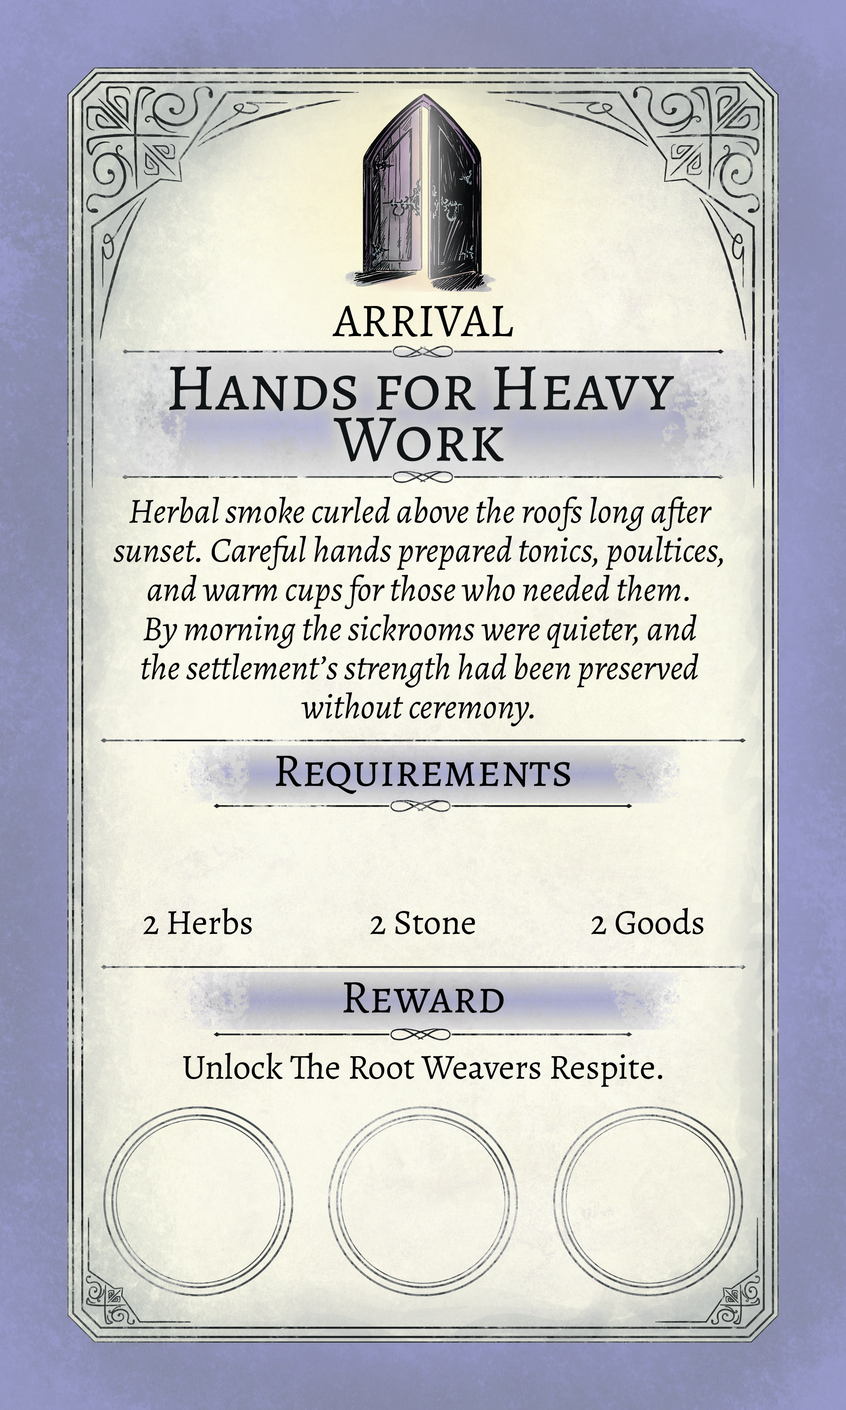
<style>
.page{position:relative;width:846px;height:1410px}
.page>*{position:absolute;margin:0}
.t1{font:47px "Alegreya-Regular";color:#000000;text-transform:uppercase}
.t2{font:66.6px "Alegreya-Regular";color:#000000;font-variant:small-caps}
.t3{font:35.2px/39.2px "Alegreya-Italic";color:#000000}
.t4{font:47px "Alegreya-Regular";color:#000000;font-variant:small-caps}
.t5{font:35.2px "Alegreya-Regular";color:#000000}
</style>
<div class="page">
<p class="t1" style="left:332px;top:305px;width:181px;height:32px">Arrival</p>
<p class="t2" style="left:169px;top:366px;width:505px;height:96px">Hands for Heavy Work</p>
<p class="t3" style="left:113px;top:496px;width:610px;height:230px;text-align:center">Herbal smoke curled above the roofs long after sunset. Careful hands prepared tonics, poultices, and warm cups for those who needed them.<br>By morning the sickrooms were quieter, and<br>the settlement’s strength had been preserved without ceremony.</p>
<p class="t4" style="left:275px;top:756px;width:295px;height:38px">Requirements</p>
<p class="t5" style="left:143px;top:907px;width:109px;height:27px">2 Herbs</p>
<p class="t5" style="left:370px;top:911px;width:105px;height:23px">2 Stone</p>
<p class="t5" style="left:591px;top:907px;width:112px;height:27px">2 Goods</p>
<p class="t4" style="left:343px;top:982px;width:161px;height:31px">Reward</p>
<p class="t5" style="left:183px;top:1052px;width:479px;height:35px">Unlock The Root Weavers Respite.</p>
</div>
